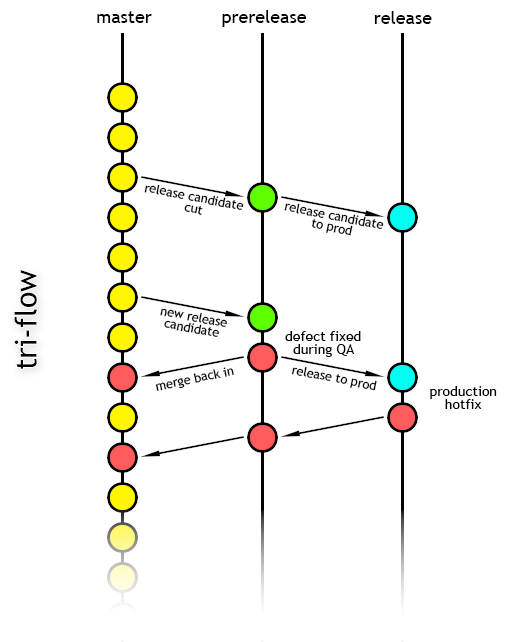
<style>
.page{position:relative;width:524px;height:642px;background:#ffffff}
.page>*{position:absolute;margin:0}
.t1{font:18px "TrebuchetMS";letter-spacing:-0.002em;color:#000000}
.t2{font:12.6px/11.7px "TrebuchetMS";letter-spacing:-0.002em;color:#000000}
.t3{font:30px "TrebuchetMS";letter-spacing:-0.002em;color:#000000}
.t4{font:14px/13px "TrebuchetMS";letter-spacing:-0.002em;color:#000000}
.t5{font:12.6px "TrebuchetMS";letter-spacing:-0.002em;color:#000000}
</style>
<div class="page">
<p class="t1" style="left:97px;top:11px;width:55px;height:12px">master</p>
<p class="t1" style="left:222px;top:10px;width:85px;height:17px">prerelease</p>
<p class="t1" style="left:374px;top:11px;width:58px;height:13px">release</p>
<p class="t2" style="left:144px;top:184px;width:100px;height:31px;text-align:center;rotate:11deg">release candidate<br> cut</p>
<p class="t2" style="left:284px;top:203px;width:100px;height:33px;text-align:center;rotate:11deg">release candidate<br>to prod</p>
<p class="t3" style="left:14px;top:270px;width:23px;height:99px;rotate:-90deg">tri-flow</p>
<p class="t2" style="left:160px;top:308px;width:67px;height:29px;text-align:center;rotate:11deg">new release<br>candidate</p>
<p class="t4" style="left:285px;top:331px;width:76px;height:26px;text-align:center">defect fixed<br>during QA</p>
<p class="t5" style="left:291px;top:366px;width:86px;height:25px;rotate:11deg">release to prod</p>
<p class="t5" style="left:155px;top:367px;width:79px;height:24px;rotate:-12deg">merge back in</p>
<p class="t4" style="left:430px;top:386px;width:67px;height:23px;text-align:center">production<br>hotfix</p>
</div>
